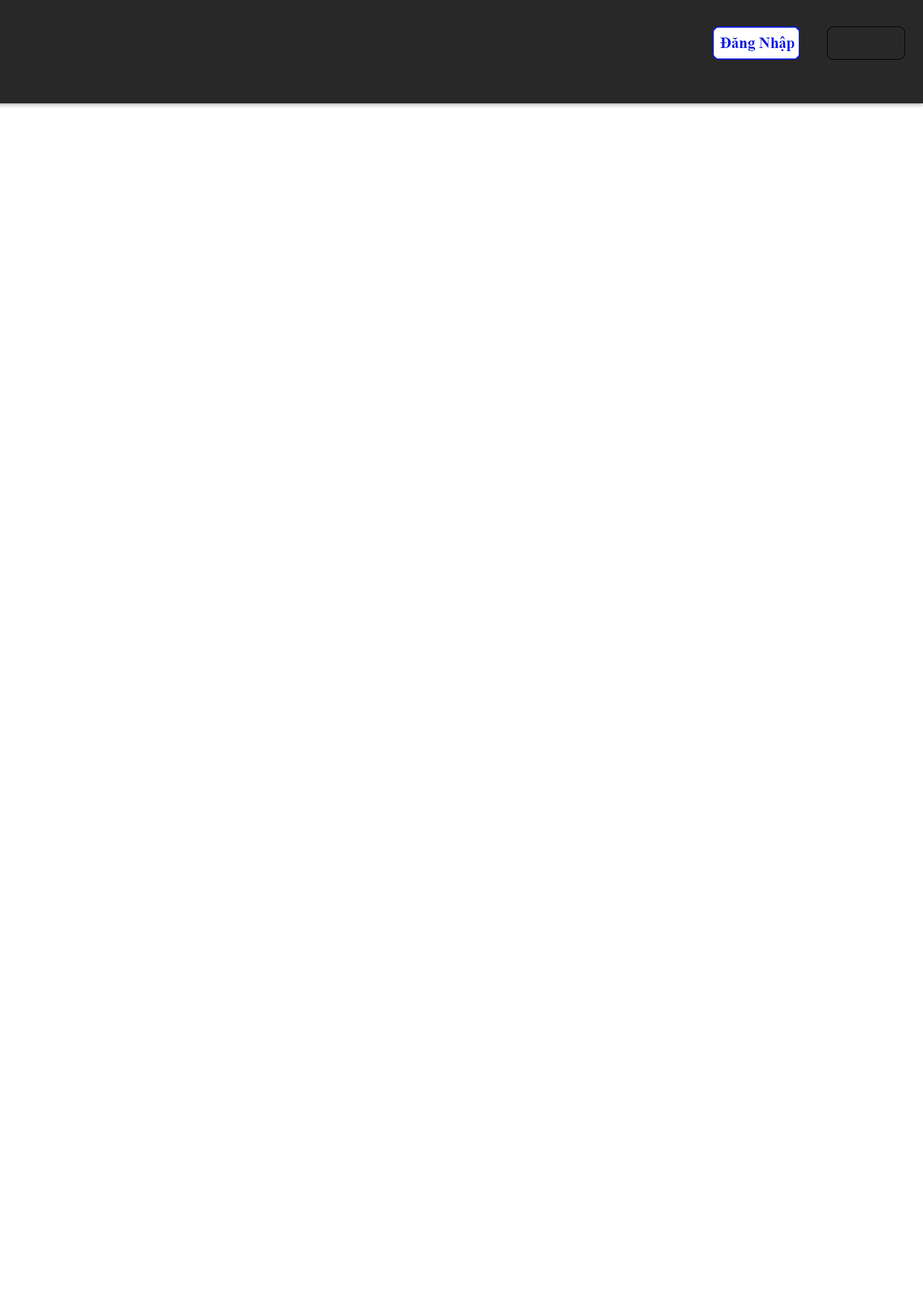
<style>
.page{position:relative;width:923px;height:1292px;background:#ffffff}
.page>*{position:absolute;margin:0}
.t1{font:15.4px "TimesNewRomanPS-BoldMT";color:#0c1ce3}
</style>
<div class="page">
<p class="t1" style="left:720px;top:36px;width:74px;height:15px">Đăng Nhập</p>
</div>
